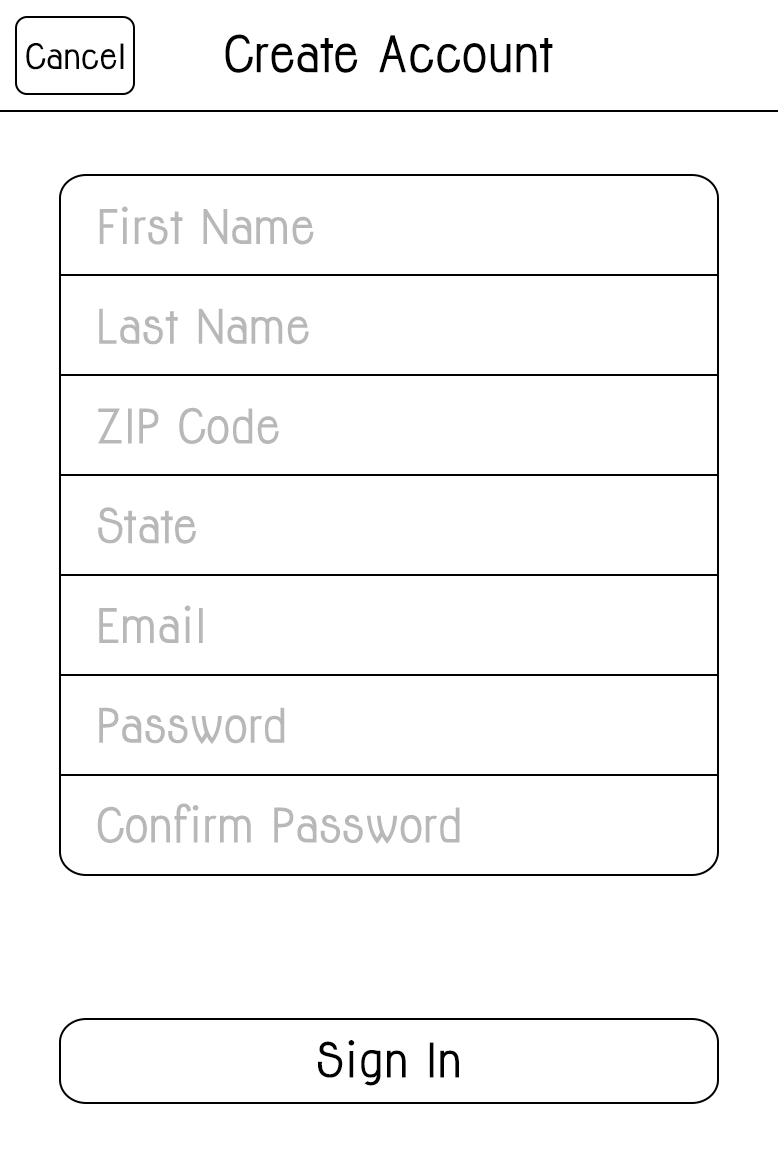
<style>
.page{position:relative;width:778px;height:1167px;background:#ffffff}
.page>*{position:absolute;margin:0}
.t1{font:46.2px "Jolly-Bold";color:#000000}
.t2{font:32px "Jolly-Bold";color:#000000}
.t3{font:43.8px/99.7px "Jolly-Bold";color:#b8b8b8}
.t4{font:43.7px "Jolly-Bold";color:#000000}
</style>
<div class="page">
<p class="t1" style="left:225px;top:34px;width:328px;height:39px">Create Account</p>
<p class="t2" style="left:26px;top:43px;width:98px;height:27px">Cancel</p>
<p class="t3" style="left:97px;top:206px;width:363px;height:638px">First Name<br>Last Name<br>ZIP Code<br>State<br>Email<br>Password<br>Confirm Password</p>
<p class="t4" style="left:318px;top:1040px;width:141px;height:46px">Sign In</p>
</div>
